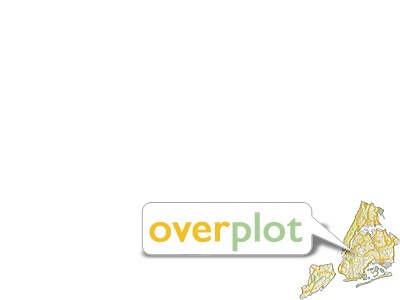
<style>
.page{position:relative;width:400px;height:300px;background:#ffffff}
.page>*{position:absolute;margin:0}
.t1{font:42px "GillSans";color:#f2bf24;font-weight:bold}
.t2{font:42px "GillSans";color:#a7cc95;font-weight:bold}
</style>
<div class="page">
<p class="t1" style="left:149px;top:212px;width:154px;height:40px">over<span class="t2">plot</span></p>
</div>
